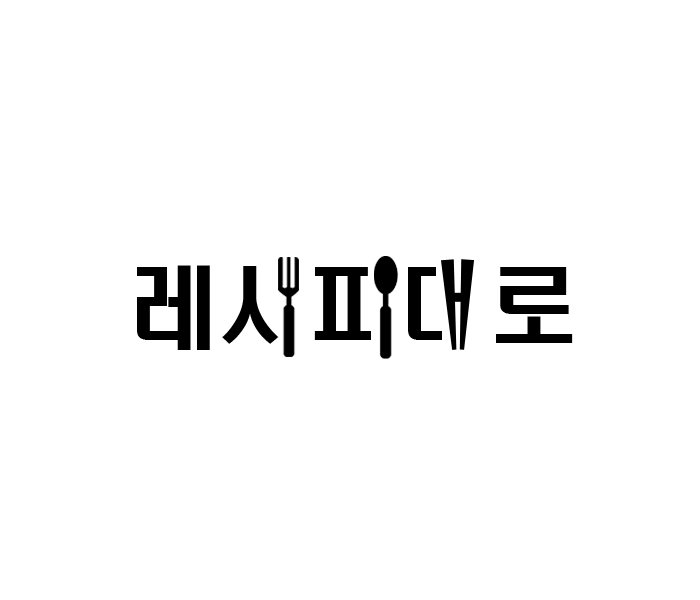
<style>
.page{position:relative;width:700px;height:600px;background:#ffffff}
.page>*{position:absolute;margin:0}
.t1{font:90px "H2hdrM";color:#000000}
</style>
<div class="page">
<p class="t1" style="left:137px;top:265px;width:436px;height:86px">레시피대로</p>
</div>
